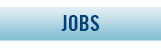
<style>
.page{position:relative;width:161px;height:48px;background:#ffffff}
.page>*{position:absolute;margin:0}
.t1{font:22px "TradeGothicLT-BoldCondTwenty";color:#00427a;text-transform:uppercase}
</style>
<div class="page">
<p class="t1" style="left:61px;top:15px;width:38px;height:16px">jobs</p>
</div>
